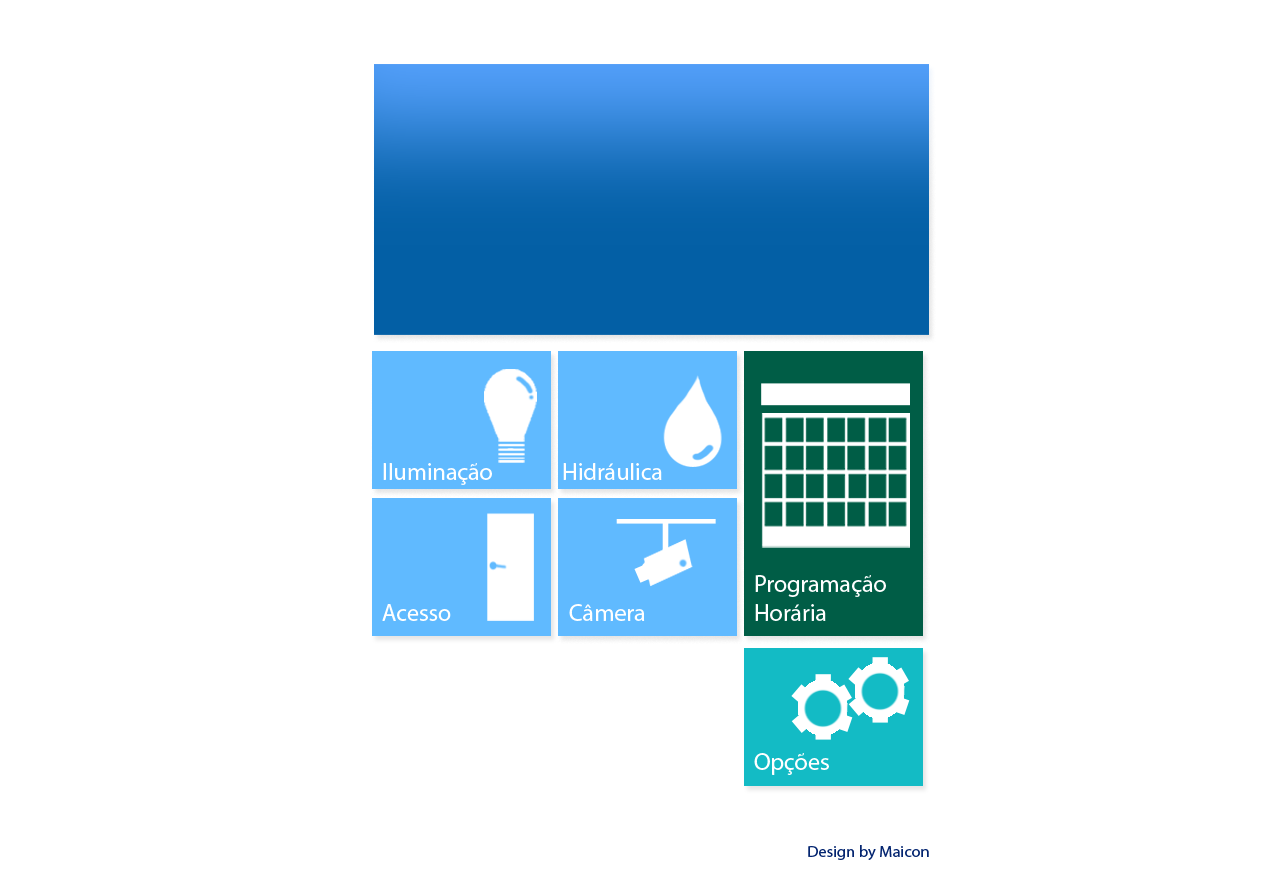
<style>
.page{position:relative;width:1280px;height:870px;background:#ffffff}
.page>*{position:absolute;margin:0}
.t1{font:24px "MyriadPro-Regular";color:#ffffff}
</style>
<div class="page">
<p class="t1" style="left:383px;top:463px;width:109px;height:22px">Iluminação</p>
<p class="t1" style="left:563px;top:463px;width:99px;height:17px">Hidráulica</p>
<p class="t1" style="left:755px;top:575px;width:131px;height:46px">Programação<br>Horária</p>
<p class="t1" style="left:382px;top:604px;width:69px;height:17px">Acesso</p>
<p class="t1" style="left:569px;top:604px;width:76px;height:17px">Câmera</p>
<p class="t1" style="left:754px;top:753px;width:75px;height:22px">Opções</p>
</div>
